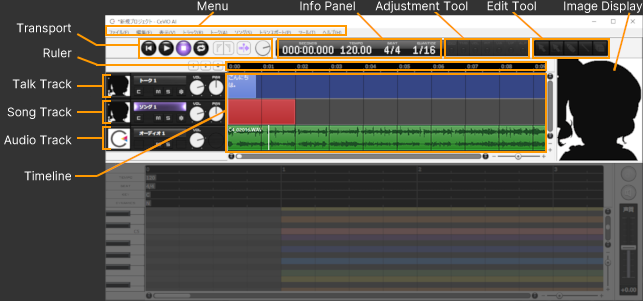
<style>
.page{position:relative;width:643px;height:301px}
.page>*{position:absolute;margin:0}
.t1{font:12px "Sarasa-Gothic-SC-Regular";color:#ffffff}
</style>
<div class="page">
<p class="t1" style="left:197px;top:1px;width:31px;height:10px">Menu</p>
<p class="t1" style="left:300px;top:1px;width:55px;height:10px">Info Panel</p>
<p class="t1" style="left:375px;top:1px;width:93px;height:12px">Adjustment Tool</p>
<p class="t1" style="left:487px;top:1px;width:49px;height:10px">Edit Tool</p>
<p class="t1" style="left:564px;top:1px;width:79px;height:12px">Image Display</p>
<p class="t1" style="left:16px;top:23px;width:56px;height:12px">Transport</p>
<p class="t1" style="left:43px;top:48px;width:29px;height:10px">Ruler</p>
<p class="t1" style="left:12px;top:79px;width:60px;height:10px">Talk Track</p>
<p class="t1" style="left:7px;top:107px;width:65px;height:12px">Song Track</p>
<p class="t1" style="left:4px;top:135px;width:68px;height:10px">Audio Track</p>
<p class="t1" style="left:24px;top:171px;width:47px;height:10px">Timeline</p>
</div>
